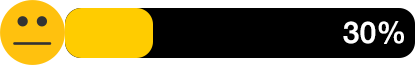
<style>
.page{position:relative;width:415px;height:65px;background:#000000}
.page>*{position:absolute;margin:0}
.t1{font:30px "HelveticaNeueCyr-Medium";color:#ffffff}
</style>
<div class="page">
<p class="t1" style="left:343px;top:21px;width:61px;height:23px">30%</p>
</div>
